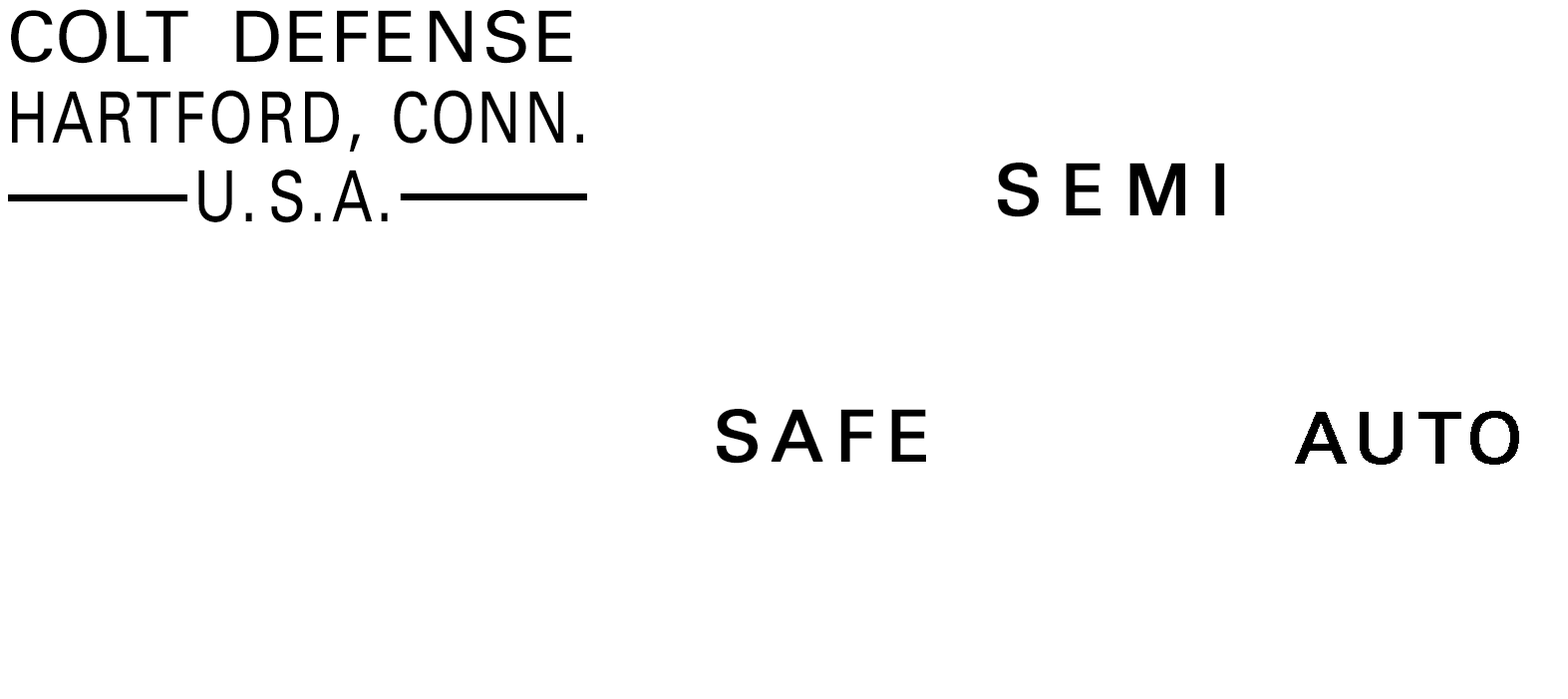
<style>
.page{position:relative;width:1568px;height:699px;background:#ffffff}
.page>*{position:absolute;margin:0}
.t1{font:70.6px "UniversLTStd";color:#000000;text-transform:uppercase}
.t2{font:70.6px "UniversLTStd";letter-spacing:0.025em;color:#000000;text-transform:uppercase}
.t3{font:70.6px "UniversLTStd";letter-spacing:0.05em;color:#000000;text-transform:uppercase}
.t4{font:70.6px "UniversLTStd";letter-spacing:0.075em;color:#000000;text-transform:uppercase}
.t5{font:70.6px "UniversLTStd";letter-spacing:0.05em;color:#000000;text-transform:uppercase;scale:0.81 1}
.t6{font:70.6px "UniversLTStd";letter-spacing:0.075em;color:#000000;text-transform:uppercase;scale:0.81 1}
.t7{font:70.6px "UniversLTStd";letter-spacing:0.1em;color:#000000;text-transform:uppercase;scale:0.81 1}
.t8{font:70.6px "UniversLTStd";letter-spacing:0.025em;color:#000000;text-transform:uppercase;scale:0.81 1}
.t9{font:70.6px "UniversLTStd";letter-spacing:0.075em;color:#000000;text-transform:uppercase;scale:0.8 1}
.t10{font:70.6px "UniversLTStd";letter-spacing:0.2em;color:#000000;text-transform:uppercase;scale:0.8 1}
.t11{font:70.6px "UniversLTStd";letter-spacing:0.1em;color:#000000;text-transform:uppercase;scale:0.8 1}
.t12{font:70.6px "UniversLTStd";color:#000000;text-transform:uppercase;scale:0.8 1}
.t13{font:70.6px "UniversLTStd";color:#000000;text-transform:uppercase;font-weight:bold}
.t14{font:70.6px "UniversLTStd";letter-spacing:0.1em;color:#000000;text-transform:uppercase;font-weight:bold}
</style>
<div class="page">
<p class="t1" style="left:11px;top:9px;width:561px;height:55px">Colt <span class="t2">De</span><span class="t3">f</span><span class="t4">e</span><span class="t3">ns</span>e M4 Carbine</p>
<p class="t5" style="left:12px;top:90px;width:571px;height:62px">HARTF<span class="t6">OR</span><span class="t7">D, </span><span class="t8">CO</span>NN.</p>
<p class="t9" style="left:198px;top:169px;width:190px;height:54px">U<span class="t10">.</span>S<span class="t11">.</span>A<span class="t12">.</span></p>
<p class="t13" style="left:998px;top:162px;width:227px;height:55px">SEMI</p>
<p class="t13" style="left:717px;top:409px;width:209px;height:55px">SAFE</p>
<p class="t14" style="left:1295px;top:411px;width:224px;height:54px">AUTO</p>
</div>
